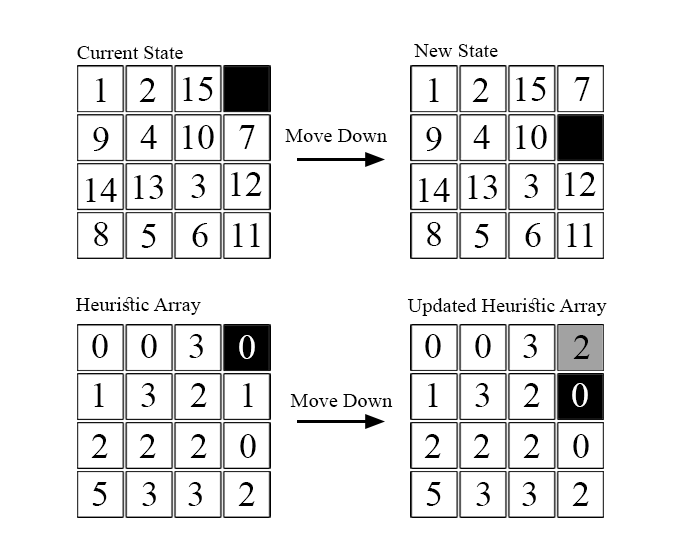
<style>
.page{position:relative;width:684px;height:541px;background:#ffffff}
.page>*{position:absolute;margin:0}
.t1{font:20.1px "TimesNewRomanPSMT";color:#000000}
.t2{font:20px "TimesNewRomanPSMT";color:#000000}
.t3{font:36px "TimesNewRomanPSMT";color:#000000}
.t4{font:35.9px "TimesNewRomanPSMT";color:#000000}
.t5{font:36px "TimesNewRomanPSMT";color:#ffffff}
</style>
<div class="page">
<p class="t1" style="left:77px;top:46px;width:106px;height:13px">Current State</p>
<p class="t2" style="left:414px;top:44px;width:84px;height:13px">New State</p>
<p class="t3" style="left:96px;top:78px;width:10px;height:24px">1</p>
<p class="t3" style="left:139px;top:78px;width:17px;height:24px">2</p>
<p class="t4" style="left:183px;top:77px;width:30px;height:24px">15</p>
<p class="t3" style="left:429px;top:78px;width:10px;height:24px">1</p>
<p class="t3" style="left:472px;top:78px;width:17px;height:24px">2</p>
<p class="t4" style="left:516px;top:77px;width:30px;height:24px">15</p>
<p class="t3" style="left:574px;top:77px;width:16px;height:24px">7</p>
<p class="t3" style="left:140px;top:125px;width:17px;height:24px">4</p>
<p class="t3" style="left:183px;top:125px;width:31px;height:24px">10</p>
<p class="t3" style="left:239px;top:125px;width:16px;height:24px">7</p>
<p class="t3" style="left:473px;top:125px;width:17px;height:24px">4</p>
<p class="t3" style="left:516px;top:125px;width:31px;height:24px">10</p>
<p class="t3" style="left:93px;top:127px;width:16px;height:24px">9</p>
<p class="t2" style="left:285px;top:129px;width:102px;height:13px">Move Down</p>
<p class="t3" style="left:426px;top:127px;width:16px;height:24px">9</p>
<p class="t3" style="left:191px;top:174px;width:14px;height:24px">3</p>
<p class="t3" style="left:231px;top:172px;width:31px;height:24px">12</p>
<p class="t3" style="left:524px;top:174px;width:14px;height:24px">3</p>
<p class="t3" style="left:565px;top:172px;width:31px;height:24px">12</p>
<p class="t4" style="left:86px;top:178px;width:31px;height:24px">14</p>
<p class="t3" style="left:134px;top:175px;width:29px;height:24px">13</p>
<p class="t4" style="left:419px;top:178px;width:31px;height:24px">14</p>
<p class="t3" style="left:468px;top:175px;width:29px;height:24px">13</p>
<p class="t3" style="left:94px;top:222px;width:14px;height:24px">8</p>
<p class="t3" style="left:427px;top:222px;width:14px;height:24px">8</p>
<p class="t3" style="left:141px;top:224px;width:15px;height:24px">5</p>
<p class="t3" style="left:192px;top:223px;width:16px;height:24px">6</p>
<p class="t3" style="left:233px;top:223px;width:27px;height:24px">11</p>
<p class="t3" style="left:474px;top:224px;width:15px;height:24px">5</p>
<p class="t3" style="left:525px;top:223px;width:16px;height:24px">6</p>
<p class="t3" style="left:567px;top:223px;width:26px;height:24px">11</p>
<p class="t2" style="left:76px;top:297px;width:125px;height:18px">Heuristic Array</p>
<p class="t2" style="left:407px;top:298px;width:200px;height:18px">Updated Heuristic Array</p>
<p class="t3" style="left:92px;top:334px;width:16px;height:24px">0</p>
<p class="t3" style="left:141px;top:334px;width:16px;height:24px">0</p>
<p class="t3" style="left:189px;top:334px;width:14px;height:24px">3</p>
<p class="t5" style="left:239px;top:335px;width:16px;height:24px">0</p>
<p class="t3" style="left:425px;top:334px;width:16px;height:24px">0</p>
<p class="t3" style="left:475px;top:334px;width:16px;height:24px">0</p>
<p class="t3" style="left:523px;top:334px;width:14px;height:24px">3</p>
<p class="t3" style="left:573px;top:335px;width:17px;height:24px">2</p>
<p class="t3" style="left:94px;top:383px;width:10px;height:24px">1</p>
<p class="t3" style="left:141px;top:383px;width:14px;height:24px">3</p>
<p class="t3" style="left:190px;top:383px;width:17px;height:24px">2</p>
<p class="t3" style="left:243px;top:383px;width:10px;height:24px">1</p>
<p class="t3" style="left:428px;top:383px;width:10px;height:24px">1</p>
<p class="t3" style="left:475px;top:383px;width:14px;height:24px">3</p>
<p class="t3" style="left:523px;top:383px;width:17px;height:24px">2</p>
<p class="t5" style="left:572px;top:383px;width:16px;height:24px">0</p>
<p class="t2" style="left:290px;top:394px;width:103px;height:13px">Move Down</p>
<p class="t3" style="left:91px;top:434px;width:17px;height:24px">2</p>
<p class="t3" style="left:139px;top:434px;width:17px;height:24px">2</p>
<p class="t3" style="left:190px;top:434px;width:17px;height:24px">2</p>
<p class="t3" style="left:240px;top:434px;width:16px;height:24px">0</p>
<p class="t3" style="left:424px;top:434px;width:17px;height:24px">2</p>
<p class="t3" style="left:473px;top:434px;width:17px;height:24px">2</p>
<p class="t3" style="left:523px;top:434px;width:17px;height:24px">2</p>
<p class="t3" style="left:573px;top:434px;width:16px;height:24px">0</p>
<p class="t3" style="left:92px;top:482px;width:15px;height:24px">5</p>
<p class="t3" style="left:142px;top:482px;width:14px;height:24px">3</p>
<p class="t3" style="left:188px;top:482px;width:14px;height:24px">3</p>
<p class="t3" style="left:238px;top:482px;width:17px;height:24px">2</p>
<p class="t3" style="left:426px;top:482px;width:15px;height:24px">5</p>
<p class="t3" style="left:476px;top:482px;width:14px;height:24px">3</p>
<p class="t3" style="left:522px;top:482px;width:14px;height:24px">3</p>
<p class="t3" style="left:572px;top:482px;width:17px;height:24px">2</p>
</div>
